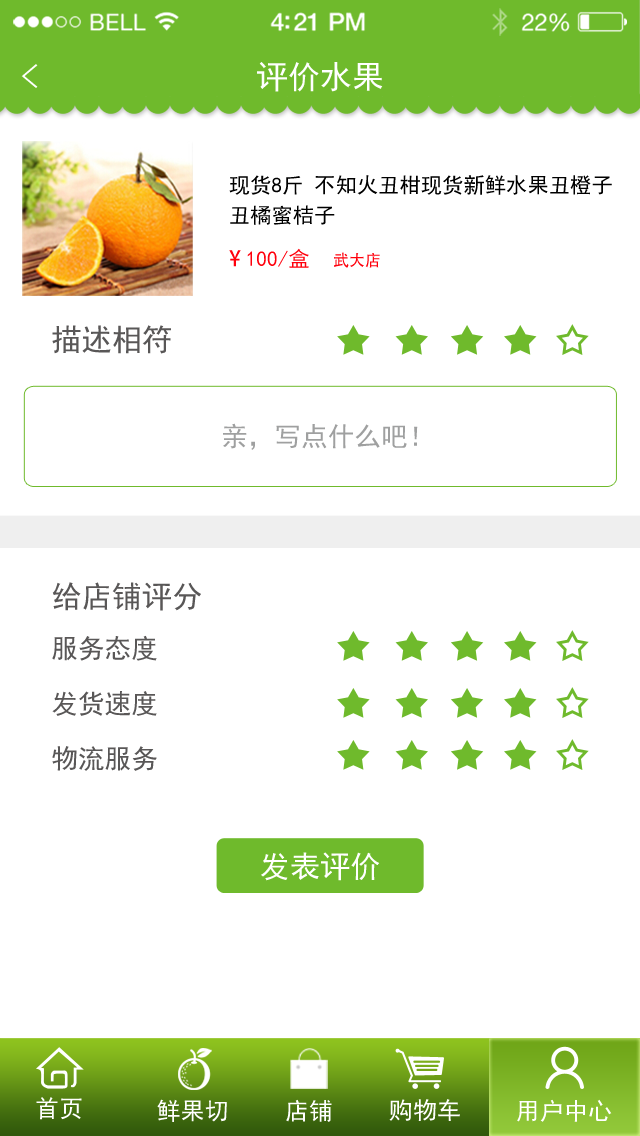
<style>
.page{position:relative;width:640px;height:1136px;background:#ffffff}
.page>*{position:absolute;margin:0}
.t1{font:33.8px "SimHei";color:#ffffff;scale:1.07 1}
.t2{font:32px "SimHei";color:#ffffff}
.t3{font:21.3px/30.2px "SimHei";color:#000000}
.t4{font:21.3px "SimHei";color:#ff000c}
.t5{font:21.3px "AdobeHeitiStd-Regular";color:#ff000c}
.t6{font:16px "AdobeHeitiStd-Regular";color:#ff000c}
.t7{font:30.2px "SimHei";color:#595757}
.t8{font:26.7px "SimHei";color:#9fa0a0}
.t9{font:26.7px "SimHei";color:#595757}
.t10{font:30.2px "SimHei";color:#ffffff}
.t11{font:24.1px "SimHei";color:#ffffff}
</style>
<div class="page">
<p class="t1" style="left:21px;top:64px;width:17px;height:24px;rotate:180deg">&gt;</p>
<p class="t2" style="left:257px;top:62px;width:126px;height:30px">评价水果</p>
<p class="t3" style="left:229px;top:175px;width:383px;height:50px">现货8斤 不知火丑柑现货新鲜水果丑橙子 <br>丑橘蜜桔子</p>
<p class="t4" style="left:229px;top:248px;width:80px;height:20px"><span class="t5">¥ </span>100/盒</p>
<p class="t6" style="left:334px;top:252px;width:46px;height:16px">武大店</p>
<p class="t7" style="left:52px;top:325px;width:119px;height:29px">描述相符</p>
<p class="t8" style="left:223px;top:423px;width:195px;height:27px">亲，写点什么吧！</p>
<p class="t7" style="left:52px;top:582px;width:149px;height:29px">给店铺评分</p>
<p class="t9" style="left:52px;top:635px;width:105px;height:26px">服务态度</p>
<p class="t9" style="left:52px;top:691px;width:105px;height:25px">发货速度</p>
<p class="t9" style="left:52px;top:746px;width:105px;height:25px">物流服务</p>
<p class="t10" style="left:261px;top:852px;width:119px;height:29px">发表评价</p>
<p class="t11" style="left:36px;top:1097px;width:46px;height:23px">首页</p>
<p class="t11" style="left:157px;top:1099px;width:70px;height:23px">鲜果切</p>
<p class="t11" style="left:286px;top:1099px;width:46px;height:23px">店铺</p>
<p class="t11" style="left:389px;top:1099px;width:71px;height:22px">购物车</p>
<p class="t11" style="left:517px;top:1099px;width:95px;height:23px">用户中心</p>
</div>
